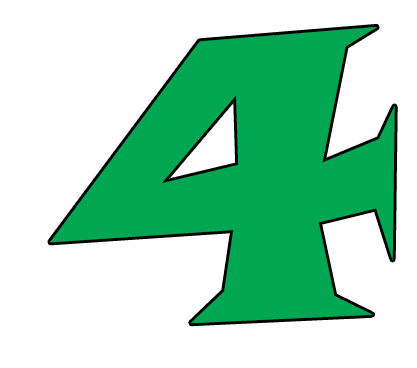
<style>
.page{position:relative;width:417px;height:368px;background:#ffffff}
.page>*{position:absolute;margin:0}
.t1{font:400px "SnapITC-Regular";color:#00a651}
</style>
<div class="page">
<p class="t1" style="left:50px;top:26px;width:345px;height:298px">4</p>
</div>
